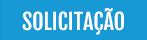
<style>
.page{position:relative;width:147px;height:40px;background:#1799d6}
.page>*{position:absolute;margin:0}
.t1{font:22px "FjallaOne";color:#ffffff;text-transform:uppercase}
</style>
<div class="page">
<p class="t1" style="left:22px;top:7px;width:102px;height:28px">SOLICITAÇÃO</p>
</div>
